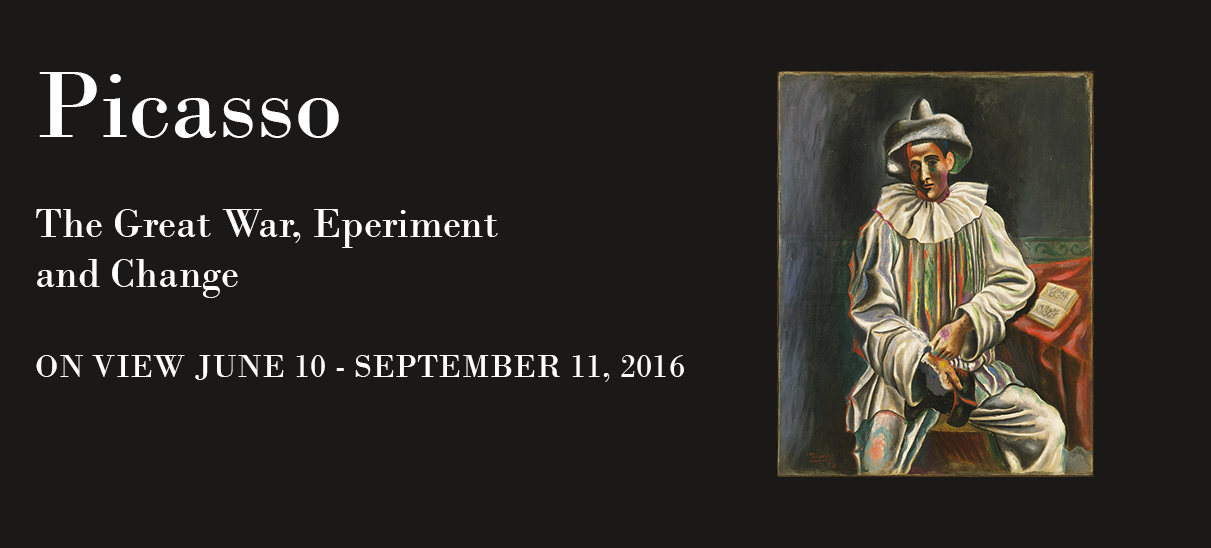
<style>
.page{position:relative;width:1211px;height:548px;background:#1b1818}
.page>*{position:absolute;margin:0}
.t1{font:33.3px "BodoniMT";color:#ffffff}
.t2{font:100px "BodoniMT";color:#ffffff}
.t3{font:41.7px "BodoniMT";color:#ffffff}
</style>
<div class="page">
<p class="t1" style="left:36px;top:72px;width:648px;height:310px"><span class="t2">Picasso<br></span><span class="t3"><br>The Great War, Eperiment<br>and Change<br><br></span>ON VIEW JUNE 10 - SEPTEMBER 11, 2016</p>
</div>
